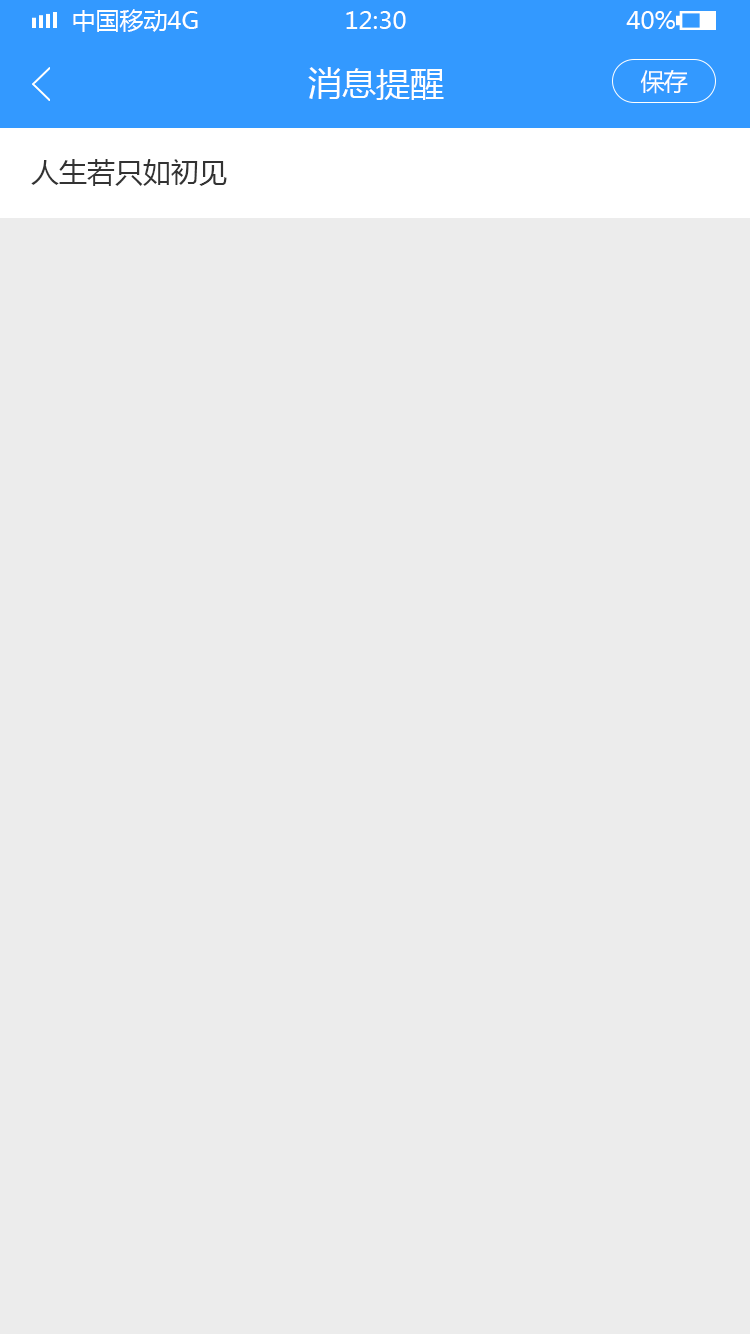
<style>
.page{position:relative;width:750px;height:1334px;background:#ececec}
.page>*{position:absolute;margin:0}
.t1{font:24px "MicrosoftYaHei";color:#ffffff;text-transform:uppercase}
.t2{font:34px "MicrosoftYaHei";color:#ffffff}
.t3{font:24px "MicrosoftYaHei";letter-spacing:-0.04em;color:#ffffff}
.t4{font:28px "MicrosoftYaHei";color:#333333}
</style>
<div class="page">
<p class="t1" style="left:73px;top:9px;width:125px;height:23px">中国移动4G</p>
<p class="t1" style="left:346px;top:11px;width:60px;height:18px">12:30</p>
<p class="t1" style="left:626px;top:11px;width:49px;height:18px">40%</p>
<p class="t2" style="left:308px;top:67px;width:136px;height:33px">消息提醒</p>
<p class="t3" style="left:640px;top:70px;width:48px;height:24px">保存</p>
<p class="t4" style="left:31px;top:159px;width:196px;height:27px">人生若只如初见</p>
</div>
